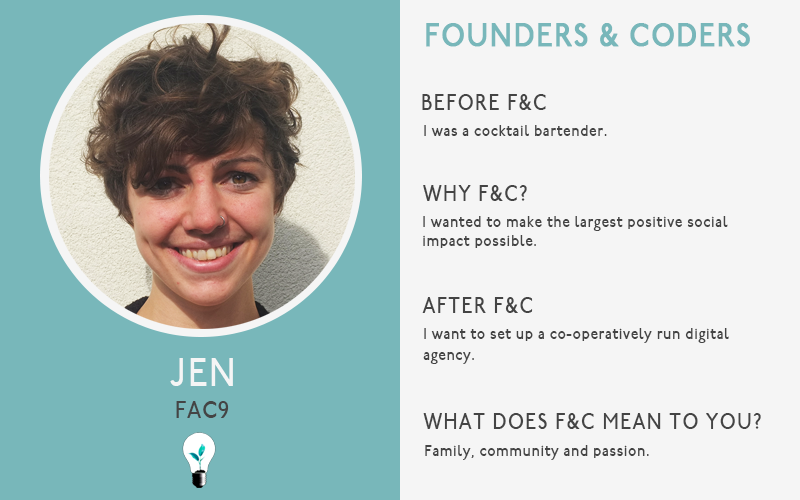
<style>
.page{position:relative;width:800px;height:500px;background:#f5f5f5}
.page>*{position:absolute;margin:0}
.t1{font:32px "P22UndergroundMedium";letter-spacing:0.05em;color:#78b7ba;font-weight:bold;scale:0.86 1}
.t2{font:22px "P22UndergroundMedium";letter-spacing:0.075em;color:#444444;scale:0.86 1}
.t3{font:16px "P22UndergroundMedium";letter-spacing:0.05em;color:#444444;scale:0.86 1}
.t4{font:40px "P22UndergroundMedium";letter-spacing:0.05em;color:#f5f5f5;scale:0.86 1}
.t5{font:24px "P22UndergroundMedium";letter-spacing:0.05em;color:#444444;scale:0.86 1}
</style>
<div class="page">
<p class="t1" style="left:426px;top:23px;width:324px;height:24px">FOUNDERS &amp; CODERS</p>
<p class="t2" style="left:422px;top:94px;width:124px;height:16px">BEFORE F&amp;C</p>
<p class="t3" style="left:424px;top:125px;width:183px;height:11px">I was a cocktail bartender.</p>
<p class="t2" style="left:423px;top:185px;width:104px;height:16px">WHY F&amp;C?</p>
<p class="t3" style="left:423px;top:216px;width:305px;height:32px">I wanted to make the largest positive social <br>impact possible.</p>
<p class="t2" style="left:422px;top:297px;width:111px;height:16px">AFTER F&amp;C</p>
<p class="t3" style="left:423px;top:328px;width:306px;height:36px">I want to set up a co-operatively run digital <br>agency.</p>
<p class="t4" style="left:170px;top:358px;width:63px;height:28px">JEN</p>
<p class="t5" style="left:176px;top:401px;width:53px;height:17px">FAC9</p>
<p class="t2" style="left:423px;top:413px;width:338px;height:16px">WHAT DOES F&amp;C MEAN TO YOU?</p>
<p class="t3" style="left:425px;top:445px;width:224px;height:15px">Family, community and passion.</p>
</div>
